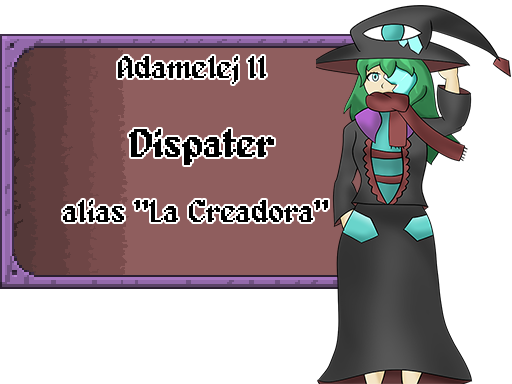
<style>
.page{position:relative;width:512px;height:384px;background:#ffffff}
.page>*{position:absolute;margin:0}
.t1{font:32px "Alagard";letter-spacing:-0.025em;color:#000000}
.t2{font:40px "Alagard";letter-spacing:-0.025em;color:#000000}
</style>
<div class="page">
<p class="t1" style="left:118px;top:56px;width:148px;height:28px">Adamelej II</p>
<p class="t2" style="left:129px;top:129px;width:145px;height:36px">Dispater</p>
<p class="t1" style="left:63px;top:200px;width:265px;height:22px">alias "La Creadora"</p>
</div>
